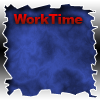
<style>
.page{position:relative;width:100px;height:100px}
.page>*{position:absolute;margin:0}
.t1{font:12.5px "Arial-Black"}
</style>
<div class="page">
<p class="t1" style="left:13px;top:14px;width:70px;height:10px">WorkTime</p>
</div>
